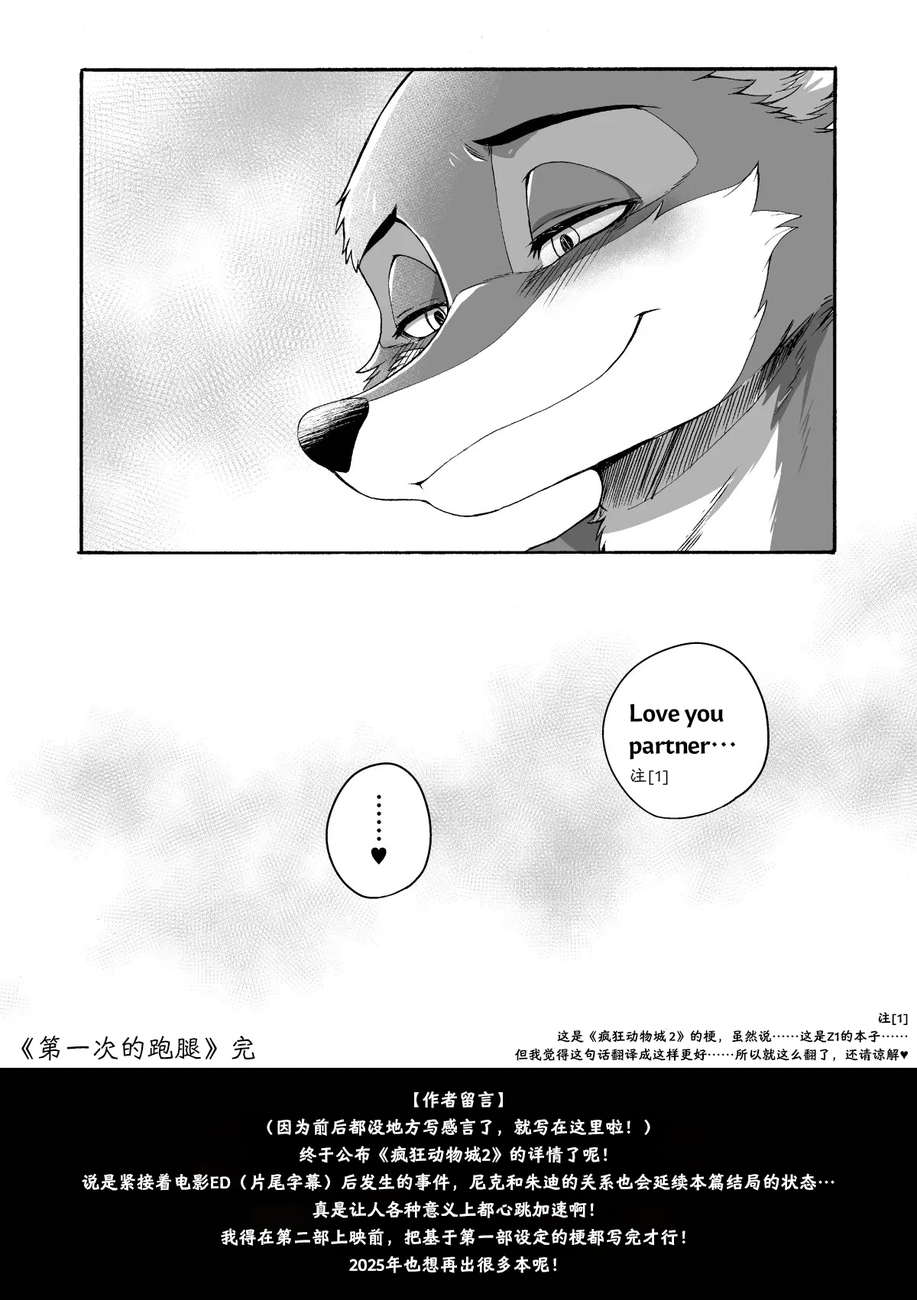
<style>
.page{position:relative;width:917px;height:1300px;background:#ffffff}
.page>*{position:absolute;margin:0}
.t1{font:27.5px/32.1px "HYShiWei75U";color:#000000}
.t2{font:18.3px "HYShiWei55U";color:#000000}
.t3{font:13.8px/18.3px "HYShiWei75U";color:#000000}
.t4{font:13.8px/18.3px "STFangsong";color:#000000}
.t5{font:27.5px "HYShiWei55U";color:#000000}
.t6{font:18.3px/27.5px "HYShiWei75U";color:#ffffff}
</style>
<div class="page">
<p class="t1" style="left:629px;top:704px;width:107px;height:56px">Love you<br>partner…</p>
<p class="t2" style="left:630px;top:768px;width:38px;height:17px">注[1]</p>
<p class="t3" style="left:514px;top:1012px;width:395px;height:50px;text-align:right">注[1]<br>这是《疯狂动物城 2》的梗，虽然说……这是Z1的本子……<br>但我觉得这句话翻译成这样更好……所以就这么翻了，还请谅解<span class="t4">♥</span></p>
<p class="t5" style="left:21px;top:1035px;width:234px;height:26px">《第一次的跑腿》完</p>
<p class="t6" style="left:82px;top:1091px;width:752px;height:183px;text-align:center">【作者留言】<br>（因为前后都没地方写感言了，就写在这里啦！）<br>终于公布《疯狂动物城2》的详情了呢！<br>说是紧接着电影ED（片尾字幕）后发生的事件，尼克和朱迪的关系也会延续本篇结局的状态…<br>真是让人各种意义上都心跳加速啊！<br>我得在第二部上映前，把基于第一部设定的梗都写完才行！<br>2025年也想再出很多本呢！</p>
</div>
